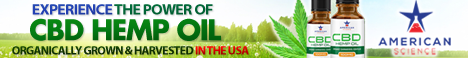
<style>
.page{position:relative;width:468px;height:58px}
.page>*{position:absolute;margin:0}
.t1{font:14.8px "MyriadPro-BoldSemiExt";letter-spacing:-0.05em;color:#02683a;text-transform:uppercase}
.t2{font:14.8px "MyriadPro-BoldSemiExt";letter-spacing:-0.05em;color:#233fb4;text-transform:uppercase}
.t3{font:27.7px "FuturaLT-Bold";letter-spacing:-0.05em;color:#037812}
.t4{font:11.9px "MyriadPro-Bold";letter-spacing:-0.05em;color:#103101;text-transform:uppercase}
.t5{font:11.9px "MyriadPro-Bold";letter-spacing:-0.05em;color:#fe0000;text-transform:uppercase}
</style>
<div class="page">
<p class="t1" style="left:32px;top:4px;width:181px;height:11px"><span class="t2">Experience </span>The Power Of</p>
<p class="t3" style="left:30px;top:18px;width:191px;height:23px">CBD HEMP OIL</p>
<p class="t4" style="left:12px;top:46px;width:237px;height:9px">Organically Grown &amp; Harvested <span class="t5">In The USA</span></p>
</div>
